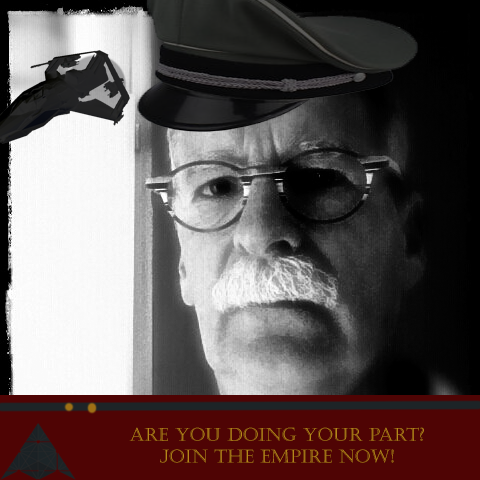
<style>
.page{position:relative;width:480px;height:480px}
.page>*{position:absolute;margin:0}
.t1{font:18px "Castellar";color:#b5871a}
</style>
<div class="page">
<p class="t1" style="left:129px;top:427px;width:295px;height:36px;text-align:center">Are You Doing Your Part?<br>Join the Empire now!</p>
</div>
